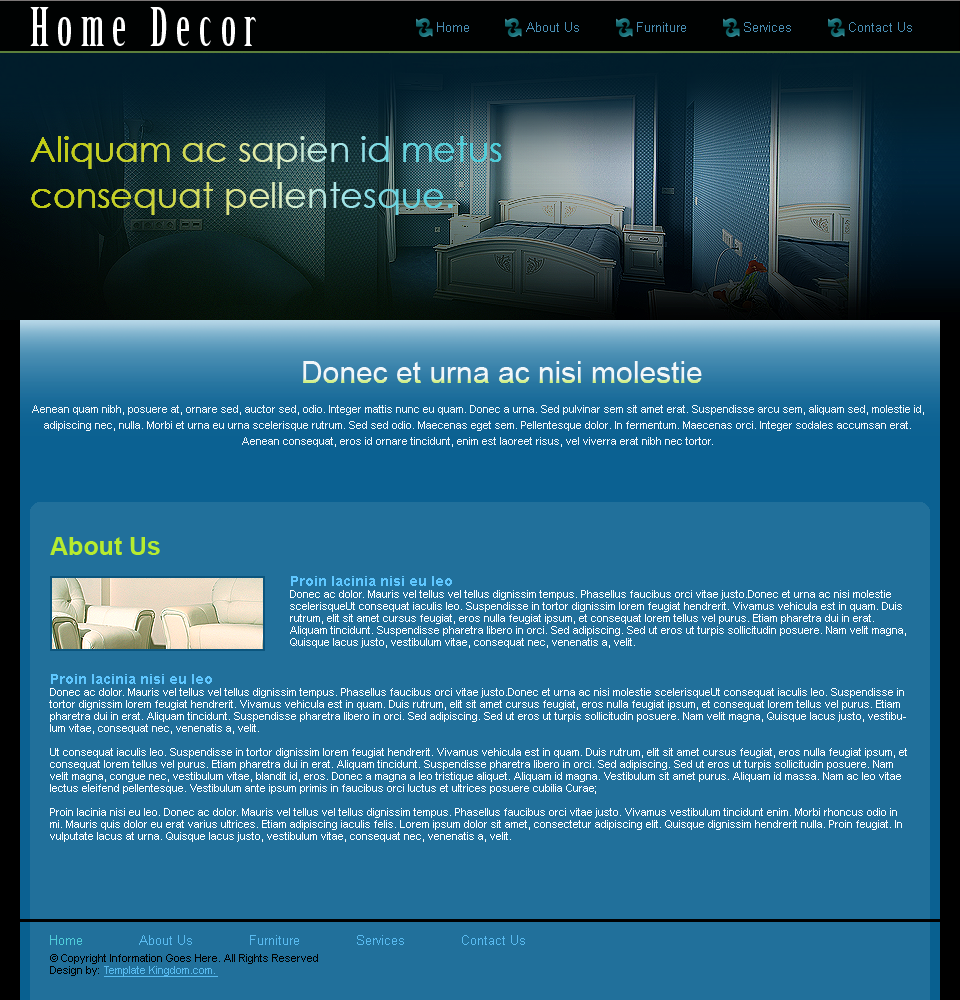
<style>
.page{position:relative;width:960px;height:1000px;background:#21709b}
.page>*{position:absolute;margin:0}
.t1{font:52px "BirchStd";letter-spacing:0.165em;color:#ffffff}
.t2{font:13px "ArialMT";color:#488db2}
.t3{font:35px/46px "CenturyGothic"}
.t4{font:30px "ArialMT";color:#f2f6f9}
.t5{font:11px/16px "ArialMT";color:#f2f6f9}
.t6{font:25px "Arial-BoldMT";color:#b7eb2f}
.t7{font:11px/12px "ArialMT";color:#ffffff}
.t8{font:14px/14px "Arial-BoldMT";color:#5fc7ff}
.t9{font:13px "ArialMT";color:#59bbf0}
.t10{font:13px "ArialMT";color:#4fcdda}
.t11{font:11px/12px "ArialMT";color:#000000}
.t12{font:11px/12px "ArialMT";color:#59bbf0;text-decoration:underline}
</style>
<div class="page">
<p class="t1" style="left:30px;top:7px;width:226px;height:39px">Home Decor</p>
<p class="t2" style="left:437px;top:22px;width:475px;height:10px">Home              About Us              Furniture              Services              Contact Us</p>
<p class="t3" style="left:30px;top:136px;width:472px;height:79px">Aliquam ac sapien id metus <br>consequat pellentesque.</p>
<p class="t4" style="left:303px;top:361px;width:399px;height:22px">Donec et urna ac nisi molestie</p>
<p class="t5" style="left:32px;top:405px;width:892px;height:42px;text-align:center">Aenean quam nibh, posuere at, ornare sed, auctor sed, odio. Integer mattis nunc eu quam. Donec a urna. Sed pulvinar sem sit amet erat. Suspendisse arcu sem, aliquam sed, molestie id, adipiscing nec, nulla. Morbi et urna eu urna scelerisque rutrum. Sed sed odio. Maecenas eget sem. Pellentesque dolor. In fermentum. Maecenas orci. Integer sodales accumsan erat. Aenean consequat, eros id ornare tincidunt, enim est laoreet risus, vel viverra erat nibh nec tortor.</p>
<p class="t6" style="left:50px;top:537px;width:110px;height:18px">About Us</p>
<p class="t7" style="left:290px;top:576px;width:616px;height:72px"><span class="t8">Proin lacinia nisi eu leo<br></span>Donec ac dolor. Mauris vel tellus vel tellus dignissim tempus. Phasellus faucibus orci vitae justo.Donec et urna ac nisi molestie scelerisqueUt consequat iaculis leo. Suspendisse in tortor dignissim lorem feugiat hendrerit. Vivamus vehicula est in quam. Duis rutrum, elit sit amet cursus feugiat, eros nulla feugiat ipsum, et consequat lorem tellus vel purus. Etiam pharetra dui in erat. Aliquam tincidunt. Suspendisse pharetra libero in orci. Sed adipiscing. Sed ut eros ut turpis sollicitudin posuere. Nam velit magna, Quisque lacus justo, vestibulum vitae, consequat nec, venenatis a, velit.</p>
<p class="t7" style="left:49px;top:674px;width:858px;height:168px"><span class="t8">Proin lacinia nisi eu leo<br></span>Donec ac dolor. Mauris vel tellus vel tellus dignissim tempus. Phasellus faucibus orci vitae justo.Donec et urna ac nisi molestie scelerisqueUt consequat iaculis leo. Suspendisse in tortor dignissim lorem feugiat hendrerit. Vivamus vehicula est in quam. Duis rutrum, elit sit amet cursus feugiat, eros nulla feugiat ipsum, et consequat lorem tellus vel purus. Etiam pharetra dui in erat. Aliquam tincidunt. Suspendisse pharetra libero in orci. Sed adipiscing. Sed ut eros ut turpis sollicitudin posuere. Nam velit magna, Quisque lacus justo, vestibulum vitae, consequat nec, venenatis a, velit. <br><br>Ut consequat iaculis leo. Suspendisse in tortor dignissim lorem feugiat hendrerit. Vivamus vehicula est in quam. Duis rutrum, elit sit amet cursus feugiat, eros nulla feugiat ipsum, et consequat lorem tellus vel purus. Etiam pharetra dui in erat. Aliquam tincidunt. Suspendisse pharetra libero in orci. Sed adipiscing. Sed ut eros ut turpis sollicitudin posuere. Nam velit magna, congue nec, vestibulum vitae, blandit id, eros. Donec a magna a leo tristique aliquet. Aliquam id magna. Vestibulum sit amet purus. Aliquam id massa. Nam ac leo vitae lectus eleifend pellentesque. Vestibulum ante ipsum primis in faucibus orci luctus et ultrices posuere cubilia Curae;<br><br>Proin lacinia nisi eu leo. Donec ac dolor. Mauris vel tellus vel tellus dignissim tempus. Phasellus faucibus orci vitae justo. Vivamus vestibulum tincidunt enim. Morbi rhoncus odio in mi. Mauris quis dolor eu erat varius ultrices. Etiam adipiscing iaculis felis. Lorem ipsum dolor sit amet, consectetur adipiscing elit. Quisque dignissim hendrerit nulla. Proin feugiat. In vulputate lacus at urna. Quisque lacus justo, vestibulum vitae, consequat nec, venenatis a, velit.</p>
<p class="t9" style="left:50px;top:935px;width:475px;height:10px"><span class="t10">Home </span>             About Us              Furniture              Services              Contact Us</p>
<p class="t11" style="left:50px;top:954px;width:268px;height:23px">© Copyright Information Goes Here. All Rights Reserved<br>Design by: <span class="t12">Template Kingdom.com.</span></p>
</div>
